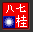
<style>
.page{position:relative;width:33px;height:32px;background:#f20000}
.page>*{position:absolute;margin:0}
.t1{font:10.4px "SimSun";color:#ffffff}
.t2{font:11.7px "SimSun";color:#ffffff}
</style>
<div class="page">
<p class="t1" style="left:6px;top:4px;width:20px;height:9px">八七</p>
<p class="t2" style="left:16px;top:15px;width:11px;height:12px">桂</p>
</div>
